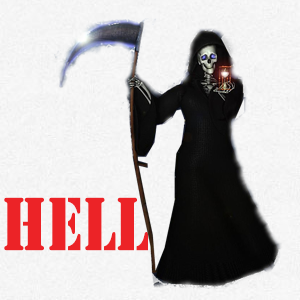
<style>
.page{position:relative;width:300px;height:300px}
.page>*{position:absolute;margin:0}
.t1{font:70px "StencilStd";color:#ec2327;scale:0.78 1}
</style>
<div class="page">
<p class="t1" style="left:4px;top:197px;width:144px;height:54px">hell</p>
</div>
